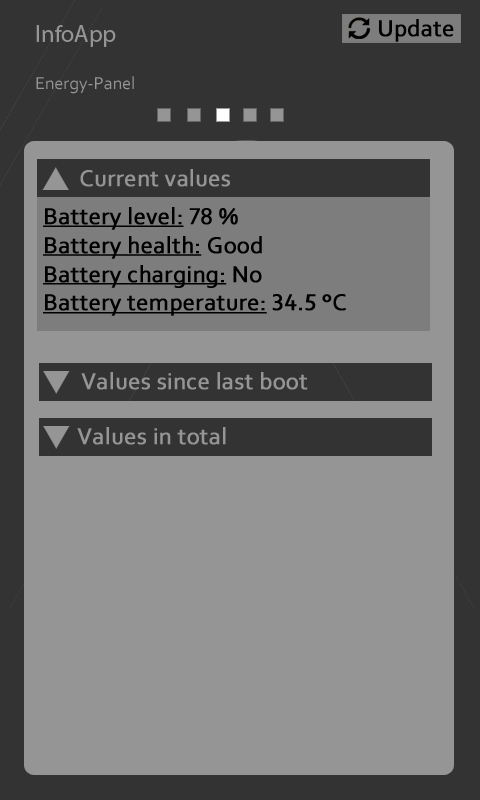
<style>
.page{position:relative;width:480px;height:800px;background:#959595}
.page>*{position:absolute;margin:0}
.t1{font:24px "Corbel";color:#000000;font-weight:bold}
.t2{font:18px "Corbel";color:#959595}
.t3{font:24px "Corbel";color:#959595;font-weight:bold}
.t4{font:24px "Corbel";color:#000000;font-weight:bold;text-decoration:underline}
</style>
<div class="page">
<p class="t1" style="left:379px;top:19px;width:75px;height:23px">Update</p>
<p class="t2" style="left:36px;top:76px;width:98px;height:18px">Energy-Panel</p>
<p class="t3" style="left:80px;top:169px;width:150px;height:18px">Current values</p>
<p class="t4" style="left:43px;top:207px;width:303px;height:109px">Battery level:<span class="t1"> 78 %<br></span>Battery health:<span class="t1"> Good<br></span>Battery charging:<span class="t1"> No<br></span>Battery temperature:<span class="t1"> 34.5 °C</span></p>
<p class="t3" style="left:81px;top:372px;width:227px;height:18px">Values since last boot</p>
<p class="t3" style="left:77px;top:427px;width:149px;height:18px">Values in total</p>
</div>
